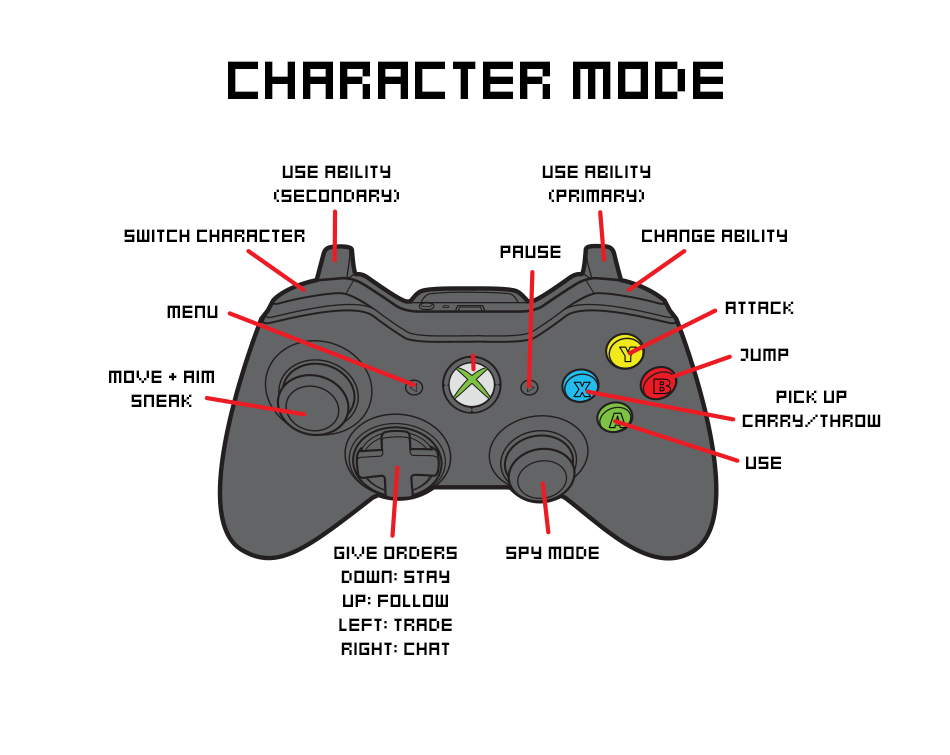
<style>
.page{position:relative;width:950px;height:755px;background:#ffffff}
.page>*{position:absolute;margin:0}
.t1{font:60px "Kenney-Mini-Square";color:#000000}
.t2{font:20px "Kenney-Mini-Square";color:#000000}
</style>
<div class="page">
<p class="t1" style="left:228px;top:61px;width:495px;height:38px">Character Mode</p>
<p class="t2" style="left:274px;top:165px;width:125px;height:37px;text-align:center">Use Ability<br>(Secondary)</p>
<p class="t2" style="left:542px;top:165px;width:109px;height:37px;text-align:center">Use Ability<br>(Primary)</p>
<p class="t2" style="left:124px;top:229px;width:181px;height:13px">Switch CHaracter</p>
<p class="t2" style="left:642px;top:229px;width:145px;height:13px">Change Ability</p>
<p class="t2" style="left:500px;top:245px;width:61px;height:13px">Pause</p>
<p class="t2" style="left:167px;top:305px;width:51px;height:13px">Menu</p>
<p class="t2" style="left:725px;top:301px;width:69px;height:13px">Attack</p>
<p class="t2" style="left:740px;top:348px;width:49px;height:13px">Jump</p>
<p class="t2" style="left:109px;top:370px;width:105px;height:37px;text-align:center">Move + Aim<br>Sneak</p>
<p class="t2" style="left:742px;top:390px;width:139px;height:37px;text-align:center">Pick Up<br>Carry/Throw</p>
<p class="t2" style="left:746px;top:456px;width:35px;height:13px">Use</p>
<p class="t2" style="left:334px;top:546px;width:123px;height:109px;text-align:center">Give Orders<br>Down: Stay<br>Up: Follow<br>Left: Trade<br>RIght: Chat</p>
<p class="t2" style="left:506px;top:546px;width:93px;height:13px">Spy Mode</p>
</div>
